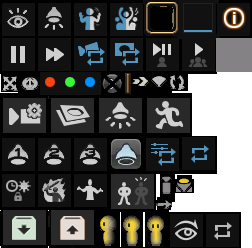
<style>
.page{position:relative;width:252px;height:248px;background:#111111}
.page>*{position:absolute;margin:0}
.t1{font:16px "H2gtrE";letter-spacing:-0.05em;color:#ffffff}
</style>
<div class="page">
<p class="t1" style="left:233px;top:12px;width:3px;height:12px">i</p>
</div>
